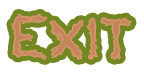
<style>
.page{position:relative;width:144px;height:72px;background:#ffffff}
.page>*{position:absolute;margin:0}
.t1{font:58px "TOBACCO";color:#c4845a;font-weight:bold}
</style>
<div class="page">
<p class="t1" style="left:11px;top:14px;width:121px;height:46px">EXIT</p>
</div>
